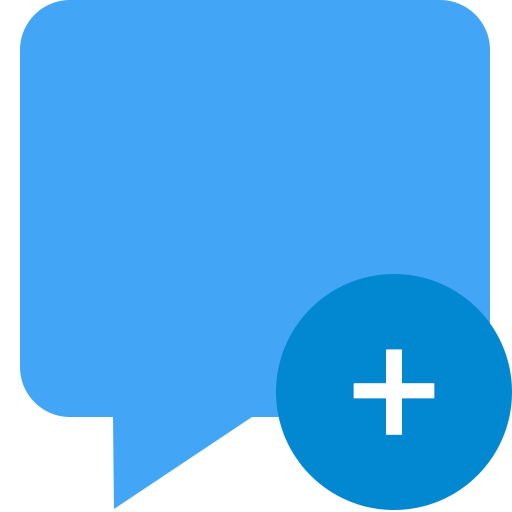
<style>
.page{position:relative;width:512px;height:512px;background:#42a5f5}
.page>*{position:absolute;margin:0}
.t1{font:162.5px "Roboto-Regular";letter-spacing:-0.06em;color:#ffffff;font-weight:bold}
</style>
<div class="page">
<p class="t1" style="left:353px;top:349px;width:82px;height:86px">+</p>
</div>
